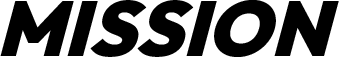
<style>
.page{position:relative;width:340px;height:58px;background:#000000}
.page>*{position:absolute;margin:0}
.t1{font:80px "Outfit-Black";color:#000000;font-style:italic;scale:0.97 1}
</style>
<div class="page">
<p class="t1" style="left:0px;top:0px;width:339px;height:57px">MISSION</p>
</div>
